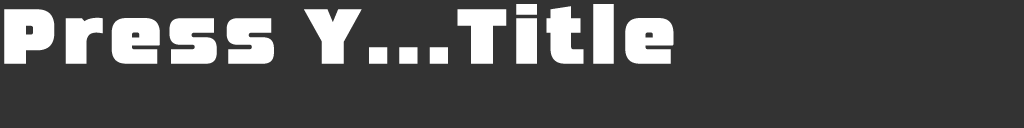
<style>
.page{position:relative;width:1024px;height:128px;background:#333333}
.page>*{position:absolute;margin:0}
.t1{font:77.4px "NEOMETRA";letter-spacing:0.07em;color:#ffffff;scale:0.95 1}
</style>
<div class="page">
<p class="t1" style="left:4px;top:4px;width:670px;height:60px">Press Y...Title</p>
</div>
